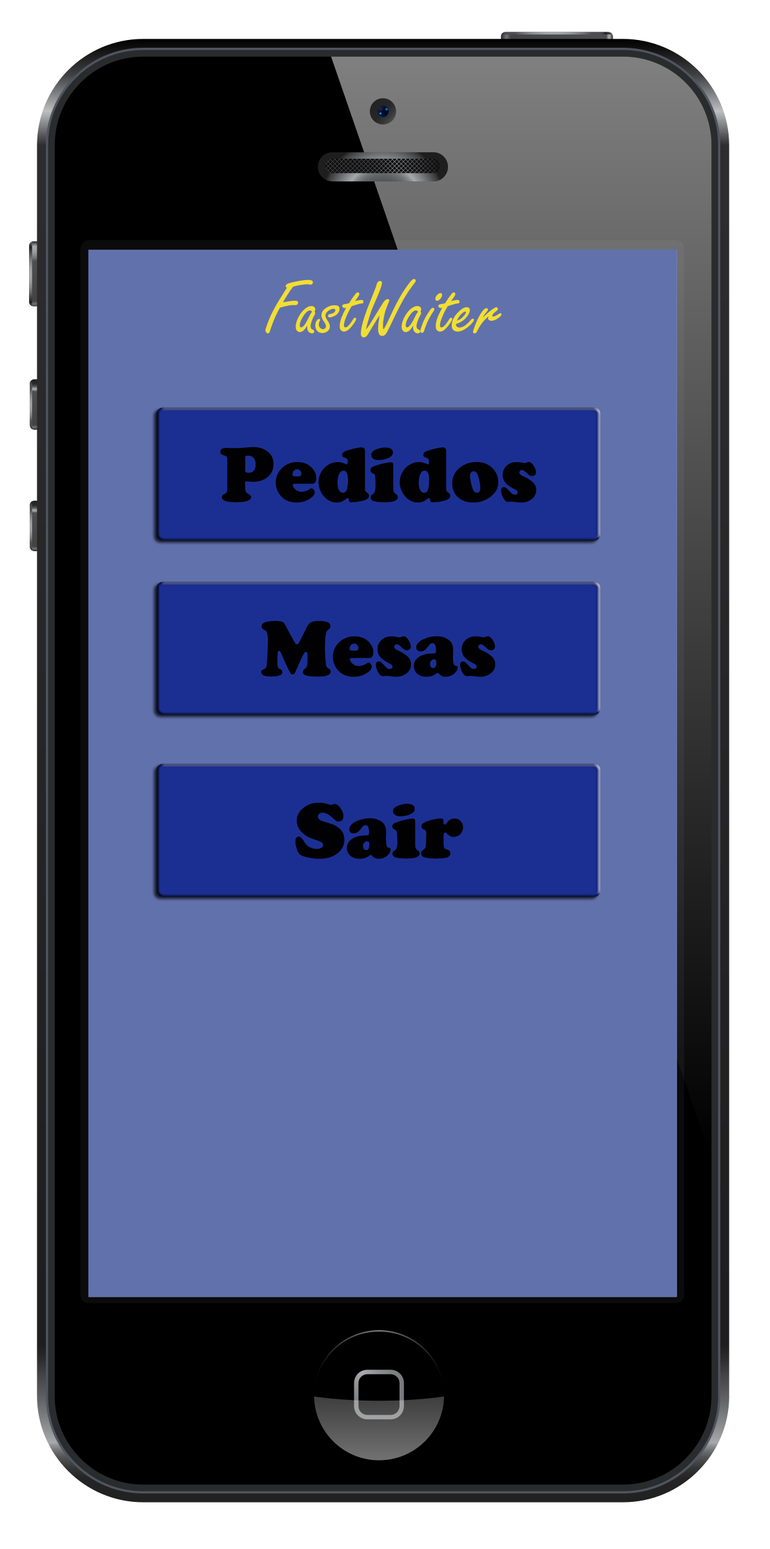
<style>
.page{position:relative;width:770px;height:1549px;background:#6171ac}
.page>*{position:absolute;margin:0}
.t1{font:80.7px "FreestyleScript-Regular";color:#f2de32}
.t2{font:80.7px "CooperBlack";color:#010002}
</style>
<div class="page">
<p class="t1" style="left:265px;top:279px;width:236px;height:59px">FastWaiter</p>
<p class="t2" style="left:220px;top:447px;width:316px;height:56px">Pedidos</p>
<p class="t2" style="left:261px;top:621px;width:235px;height:56px">Mesas</p>
<p class="t2" style="left:295px;top:802px;width:168px;height:57px">Sair</p>
</div>
